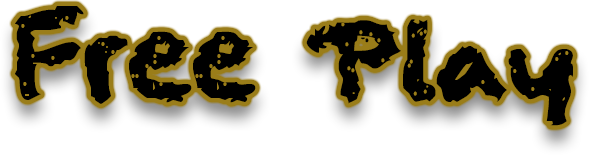
<style>
.page{position:relative;width:589px;height:155px;background:#ffffff}
.page>*{position:absolute;margin:0}
.t1{font:100px "squeakychalksound";color:#000000}
</style>
<div class="page">
<p class="t1" style="left:15px;top:6px;width:558px;height:120px">Free Play</p>
</div>
